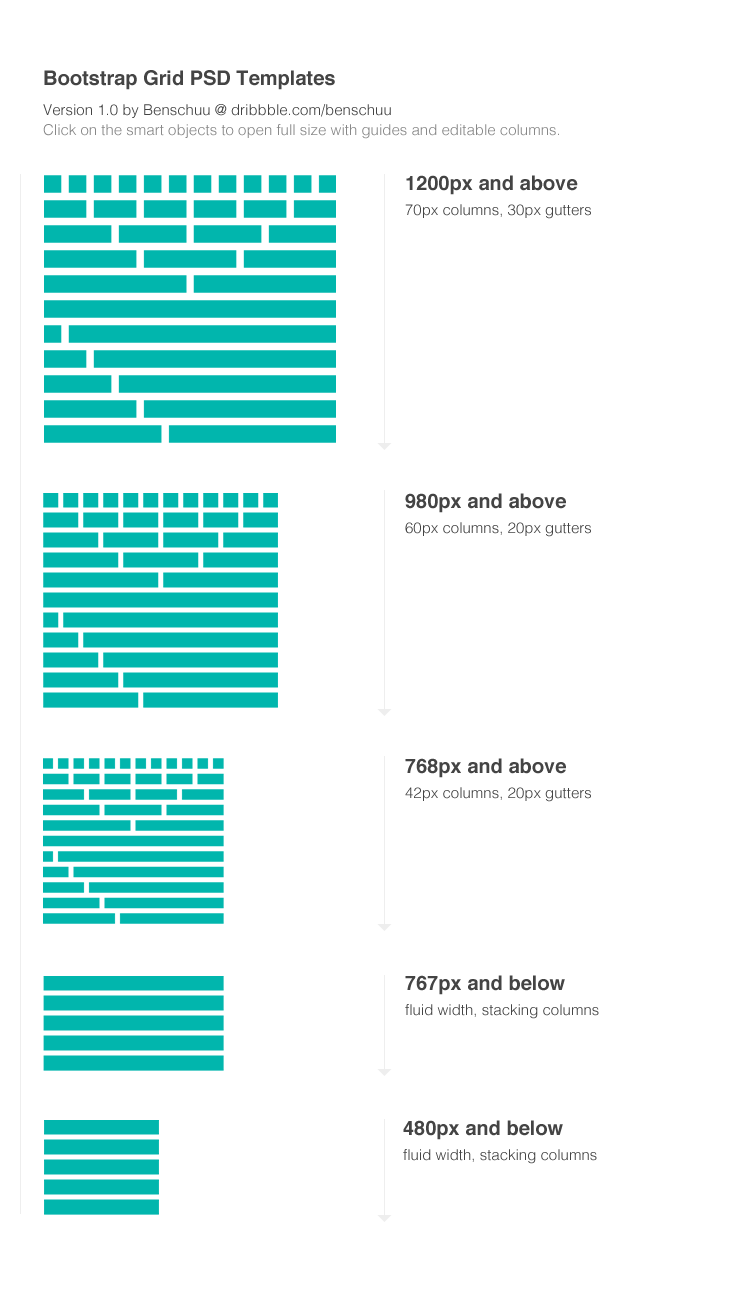
<style>
.page{position:relative;width:750px;height:1300px;background:#ffffff}
.page>*{position:absolute;margin:0}
.t1{font:15px/20px "Helvetica-Light";color:#888888}
.t2{font:20px/25px "Helvetica-Bold";color:#444444}
.t3{font:15px/30px "Helvetica-Light";color:#444444}
.t4{font:15px/20px "Helvetica-Light";color:#444444}
.t5{font:15px/25px "Helvetica-Light";color:#444444}
</style>
<div class="page">
<p class="t1" style="left:43px;top:70px;width:516px;height:69px"><span class="t2">Bootstrap Grid PSD Templates<br></span><span class="t3">Version 1.0</span><span class="t4"> by Benschuu @ dribbble.com/benschuu<br></span>Click on the smart objects to open full size with guides and editable columns.</p>
<p class="t5" style="left:405px;top:175px;width:186px;height:44px"><span class="t2">1200px and above<br></span>70px columns, 30px gutters</p>
<p class="t5" style="left:405px;top:493px;width:186px;height:44px"><span class="t2">980px and above<br></span>60px columns, 20px gutters</p>
<p class="t5" style="left:405px;top:758px;width:186px;height:44px"><span class="t2">768px and above<br></span>42px columns, 20px gutters</p>
<p class="t5" style="left:405px;top:975px;width:194px;height:44px"><span class="t2">767px and below<br></span>fluid width, stacking columns</p>
<p class="t5" style="left:403px;top:1120px;width:194px;height:44px"><span class="t2">480px and below<br></span>fluid width, stacking columns</p>
</div>
